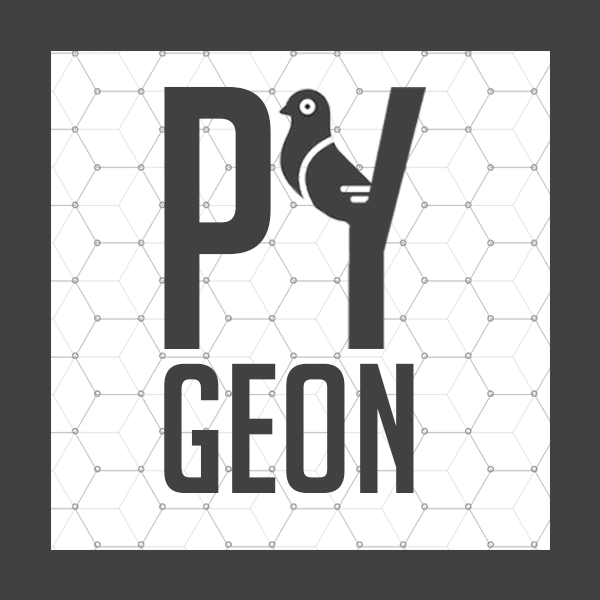
<style>
.page{position:relative;width:600px;height:600px;background:#ffffff}
.page>*{position:absolute;margin:0}
.t1{font:365.1px "BigNoodleTitling";color:#414143}
.t2{font:180.5px "BigNoodleTitling";color:#414143}
</style>
<div class="page">
<p class="t1" style="left:164px;top:86px;width:107px;height:263px">P</p>
<p class="t2" style="left:164px;top:363px;width:250px;height:130px">GEON</p>
</div>
